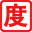
<style>
.page{position:relative;width:32px;height:32px;background:#ffffff}
.page>*{position:absolute;margin:0}
.t1{font:25px "AdobeHeitiStd-Regular";color:#f21314;font-weight:bold}
</style>
<div class="page">
<p class="t1" style="left:3px;top:3px;width:24px;height:24px">度</p>
</div>
